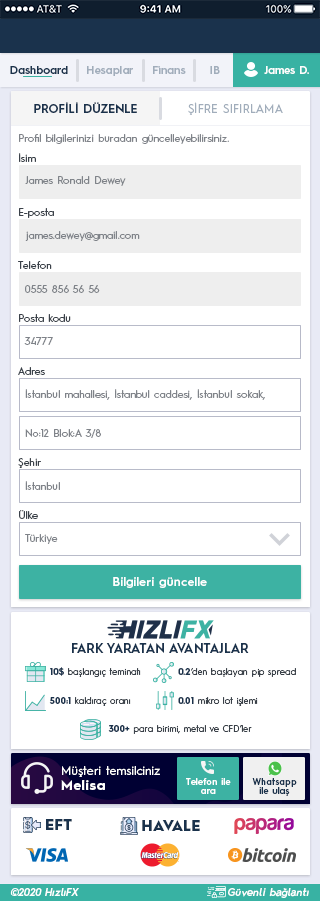
<style>
.page{position:relative;width:320px;height:901px;background:#ffffff}
.page>*{position:absolute;margin:0}
.t1{font:11.1px "HurmeGeometricSans3-SemiBold";color:#1a324c}
.t2{font:11.1px "HurmeGeometricSans3-SemiBold";color:#a1adbb}
.t3{font:11.1px "HurmeGeometricSans3-SemiBold";color:#fefefe}
.t4{font:11.9px "HurmeGeometricSans1-SemiBold";letter-spacing:0.01em;color:#1a324c}
.t5{font:11.9px "HurmeGeometricSans1-Regular";letter-spacing:0.01em;color:#a1adbb}
.t6{font:10.2px "HurmeGeometricSans1-Regular";letter-spacing:0.01em;color:#7f8389}
.t7{font:10.2px "HurmeGeometricSans1-Regular";letter-spacing:0.01em;color:#3a4149}
.t8{font:11.9px "HurmeGeometricSans1-SemiBold";letter-spacing:0.025em;color:#ffffff}
.t9{font:12.8px "HurmeGeometricSans1-SemiBold";color:#1a324c}
.t10{font:9px "HurmeGeometricSans1-Regular";color:#3a4149}
.t11{font:9px "HurmeGeometricSans1-Bold";color:#1a324c}
.t12{font:11.9px/15.4px "HurmeGeometricSans1-Regular";letter-spacing:0.025em;color:#ffffff}
.t13{font:13.7px/15.4px "HurmeGeometricSans1-Bold";letter-spacing:0.05em;color:#ffffff}
.t14{font:8.9px/8.9px "HurmeGeometricSans3-SemiBold";letter-spacing:0.01em;color:#ffffff}
.t15{font:8.9px/8.9px "HurmeGeometricSans3-SemiBold";letter-spacing:0.01em;color:#1a324c}
.t16{font:14.5px "HurmeGeometricSans1-Black";letter-spacing:0.025em;color:#1a324c}
.t17{font:10.2px "HurmeGeometricSans2-SemiBoldObl";letter-spacing:0.025em;color:#ffffff}
</style>
<div class="page">
<p class="t1" style="left:10px;top:66px;width:58px;height:8px">Dashboard</p>
<p class="t2" style="left:87px;top:66px;width:46px;height:10px">Hesaplar</p>
<p class="t2" style="left:153px;top:66px;width:33px;height:8px">Finans</p>
<p class="t2" style="left:210px;top:66px;width:10px;height:8px">IB</p>
<p class="t3" style="left:264px;top:66px;width:45px;height:8px">James D.</p>
<p class="t4" style="left:34px;top:102px;width:103px;height:11px">PROFİLİ DÜZENLE</p>
<p class="t5" style="left:188px;top:102px;width:95px;height:13px">ŞİFRE SIFIRLAMA</p>
<p class="t6" style="left:19px;top:134px;width:210px;height:10px">Profil bilgilerinizi buradan güncelleyebilirsiniz.</p>
<p class="t7" style="left:19px;top:153px;width:17px;height:9px">İsim</p>
<p class="t6" style="left:25px;top:176px;width:101px;height:10px">James Ronald Dewey</p>
<p class="t7" style="left:19px;top:208px;width:35px;height:10px">E-posta</p>
<p class="t6" style="left:25px;top:231px;width:115px;height:10px">james.dewey@gmail.com</p>
<p class="t7" style="left:18px;top:261px;width:34px;height:8px">Telefon</p>
<p class="t6" style="left:25px;top:285px;width:75px;height:8px">0555 856 56 56</p>
<p class="t7" style="left:19px;top:314px;width:52px;height:8px">Posta kodu</p>
<p class="t6" style="left:24px;top:337px;width:29px;height:8px">34777</p>
<p class="t7" style="left:18px;top:367px;width:27px;height:8px">Adres</p>
<p class="t6" style="left:25px;top:389px;width:240px;height:11px">İstanbul mahallesi, İstanbul caddesi, İstanbul sokak,</p>
<p class="t6" style="left:25px;top:429px;width:76px;height:9px">No:12 Blok:A 3/8</p>
<p class="t7" style="left:18px;top:458px;width:23px;height:10px">Şehir</p>
<p class="t6" style="left:25px;top:481px;width:35px;height:9px">İstanbul</p>
<p class="t7" style="left:19px;top:510px;width:19px;height:9px">Ülke</p>
<p class="t6" style="left:25px;top:534px;width:33px;height:10px">Türkiye</p>
<p class="t8" style="left:113px;top:577px;width:94px;height:11px">Bilgileri güncelle</p>
<p class="t9" style="left:72px;top:643px;width:177px;height:10px">FARK YARATAN AVANTAJLAR</p>
<p class="t10" style="left:50px;top:667px;width:91px;height:10px"><span class="t11">10$</span> başlangıç teminatı</p>
<p class="t10" style="left:178px;top:668px;width:118px;height:9px"><span class="t11">0.2</span>‘den başlayan pip spread</p>
<p class="t10" style="left:49px;top:697px;width:82px;height:9px"><span class="t11">500:1</span> kaldıraç oranı</p>
<p class="t10" style="left:178px;top:697px;width:80px;height:9px"><span class="t11">0.01</span> mikro lot işlemi</p>
<p class="t10" style="left:108px;top:725px;width:144px;height:9px"><span class="t11">300+</span> para birimi, metal ve CFD’ler</p>
<p class="t12" style="left:61px;top:766px;width:99px;height:24px">Müşteri temsilciniz<br><span class="t13">Melisa</span></p>
<p class="t14" style="left:186px;top:778px;width:45px;height:16px;text-align:center">Telefon ile<br>ara</p>
<p class="t15" style="left:252px;top:778px;width:45px;height:18px;text-align:center">Whatsapp<br>ile ulaş</p>
<p class="t16" style="left:46px;top:819px;width:26px;height:11px">EFT</p>
<p class="t16" style="left:142px;top:820px;width:58px;height:11px">HAVALE</p>
<p class="t17" style="left:10px;top:888px;width:69px;height:8px">©2020 HızlıFX</p>
<p class="t17" style="left:228px;top:888px;width:81px;height:10px">Güvenli bağlantı</p>
</div>
